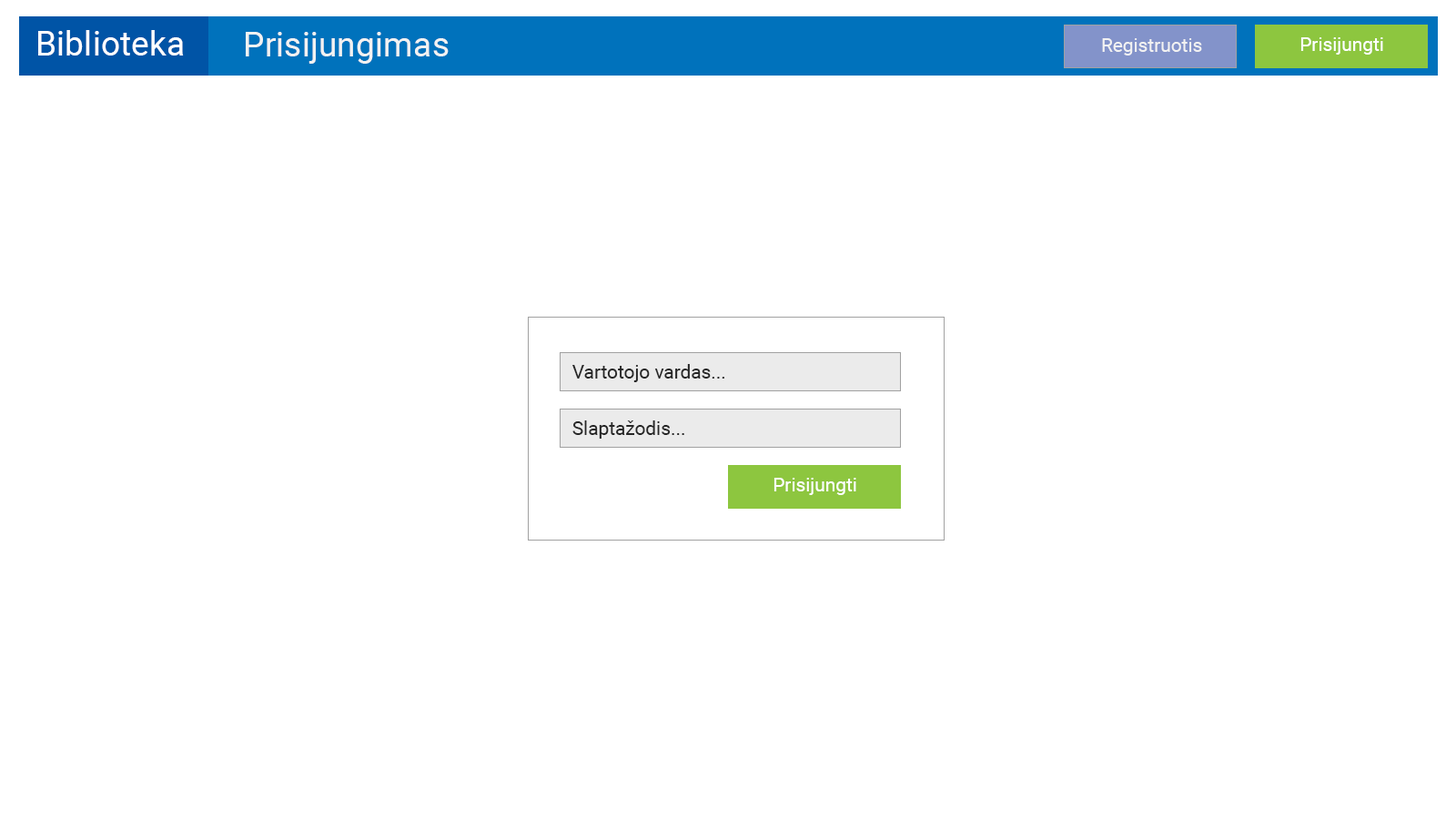
<style>
.page{position:relative;width:1456px;height:819px;background:#ffffff}
.page>*{position:absolute;margin:0}
.t1{font:34.1px "Roboto-Regular";color:#ffffff}
.t2{font:34.1px "Roboto-Regular";color:#f2f2f2}
.t3{font:19px "Roboto-Regular";color:#f2f2f2}
.t4{font:19px "Roboto-Regular";color:#ffffff}
.t5{font:19px "Roboto-Regular";color:#262626}
</style>
<div class="page">
<p class="t1" style="left:38px;top:30px;width:146px;height:26px">Biblioteka</p>
<p class="t2" style="left:246px;top:32px;width:203px;height:32px">Prisijungimas</p>
<p class="t3" style="left:1102px;top:38px;width:100px;height:18px">Registruotis</p>
<p class="t4" style="left:1300px;top:37px;width:83px;height:18px">Prisijungti</p>
<p class="t5" style="left:572px;top:364px;width:153px;height:18px">Vartotojo vardas...</p>
<p class="t5" style="left:572px;top:420px;width:112px;height:19px">Slaptažodis...</p>
<p class="t4" style="left:773px;top:478px;width:83px;height:17px">Prisijungti</p>
</div>
